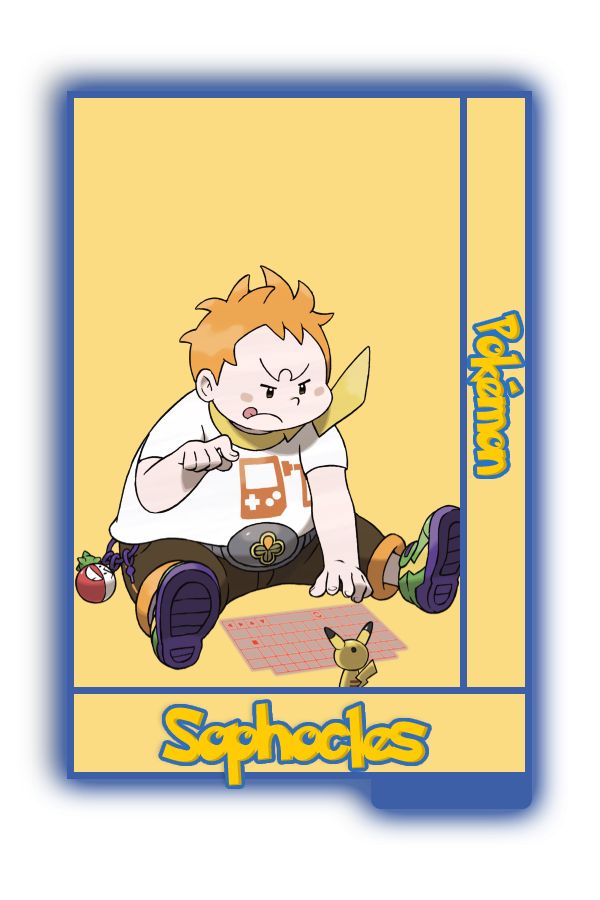
<style>
.page{position:relative;width:600px;height:900px;background:#fbdc83}
.page>*{position:absolute;margin:0}
.t1{font:48.8px "PokemonSolidNormal";color:#ffcb05;scale:0.8 1}
.t2{font:60.1px "PokemonSolidNormal";color:#ffcb05;scale:0.96 1}
</style>
<div class="page">
<p class="t1" style="left:469px;top:313px;width:54px;height:163px;rotate:90deg">Pokémon</p>
<p class="t2" style="left:162px;top:702px;width:267px;height:84px">Sophocles</p>
</div>
